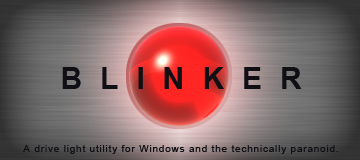
<style>
.page{position:relative;width:360px;height:160px}
.page>*{position:absolute;margin:0}
.t1{font:30px "Arial-BoldMT";letter-spacing:0.6em;color:#0f0f14}
.t2{font:10px "ArialMT";letter-spacing:0.08em;color:#0f0f14}
</style>
<div class="page">
<p class="t1" style="left:62px;top:67px;width:240px;height:22px">BLINKER</p>
<p class="t2" style="left:23px;top:145px;width:315px;height:9px">A drive light utility for Windows and the technically paranoid.</p>
</div>
